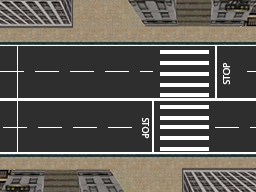
<style>
.page{position:relative;width:256px;height:192px;background:#2e2e2e}
.page>*{position:absolute;margin:0}
.t1{font:10px "MyriadPro-Regular";color:#ffffff}
</style>
<div class="page">
<p class="t1" style="left:223px;top:63px;width:7px;height:22px;rotate:-90deg">STOP</p>
<p class="t1" style="left:142px;top:117px;width:7px;height:22px;rotate:90deg">STOP</p>
</div>
